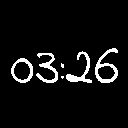
<style>
.page{position:relative;width:128px;height:128px;background:#000000}
.page>*{position:absolute;margin:0}
.t1{font:58.3px "IndieFlower";color:#ffffff}
</style>
<div class="page">
<p class="t1" style="left:11px;top:48px;width:107px;height:35px">03:26</p>
</div>
